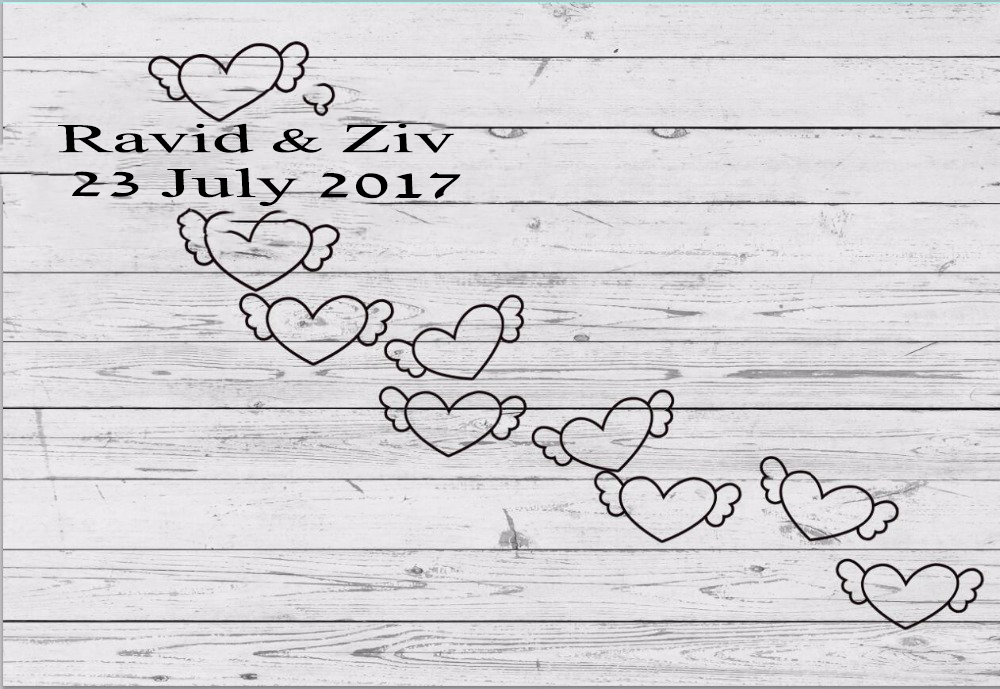
<style>
.page{position:relative;width:1000px;height:689px}
.page>*{position:absolute;margin:0}
.t1{font:40.7px "David";color:#000000;scale:2.01 1}
.t2{font:41.5px "David";color:#000000;scale:2 1}
</style>
<div class="page">
<p class="t1" style="left:58px;top:123px;width:396px;height:30px">Ravid &amp; Ziv</p>
<p class="t2" style="left:72px;top:168px;width:389px;height:38px">23 July 2017</p>
</div>
